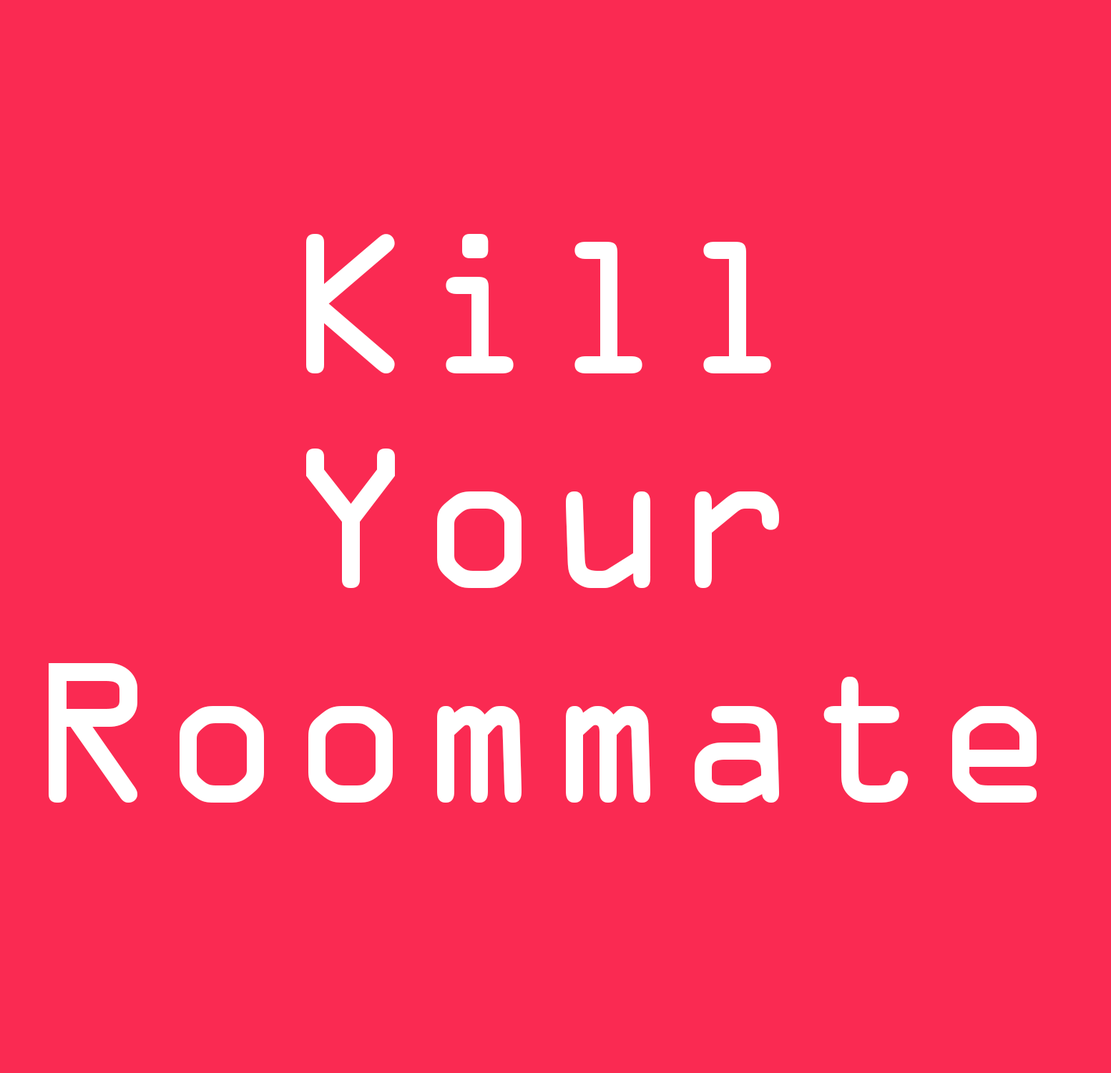
<style>
.page{position:relative;width:1111px;height:1073px;background:#fa2a52}
.page>*{position:absolute;margin:0}
.t1{font:178.9px "OCRAStd";color:#ffffff}
</style>
<div class="page">
<p class="t1" style="left:49px;top:234px;width:988px;height:569px;text-align:center">Kill<br>Your<br>Roommate</p>
</div>
